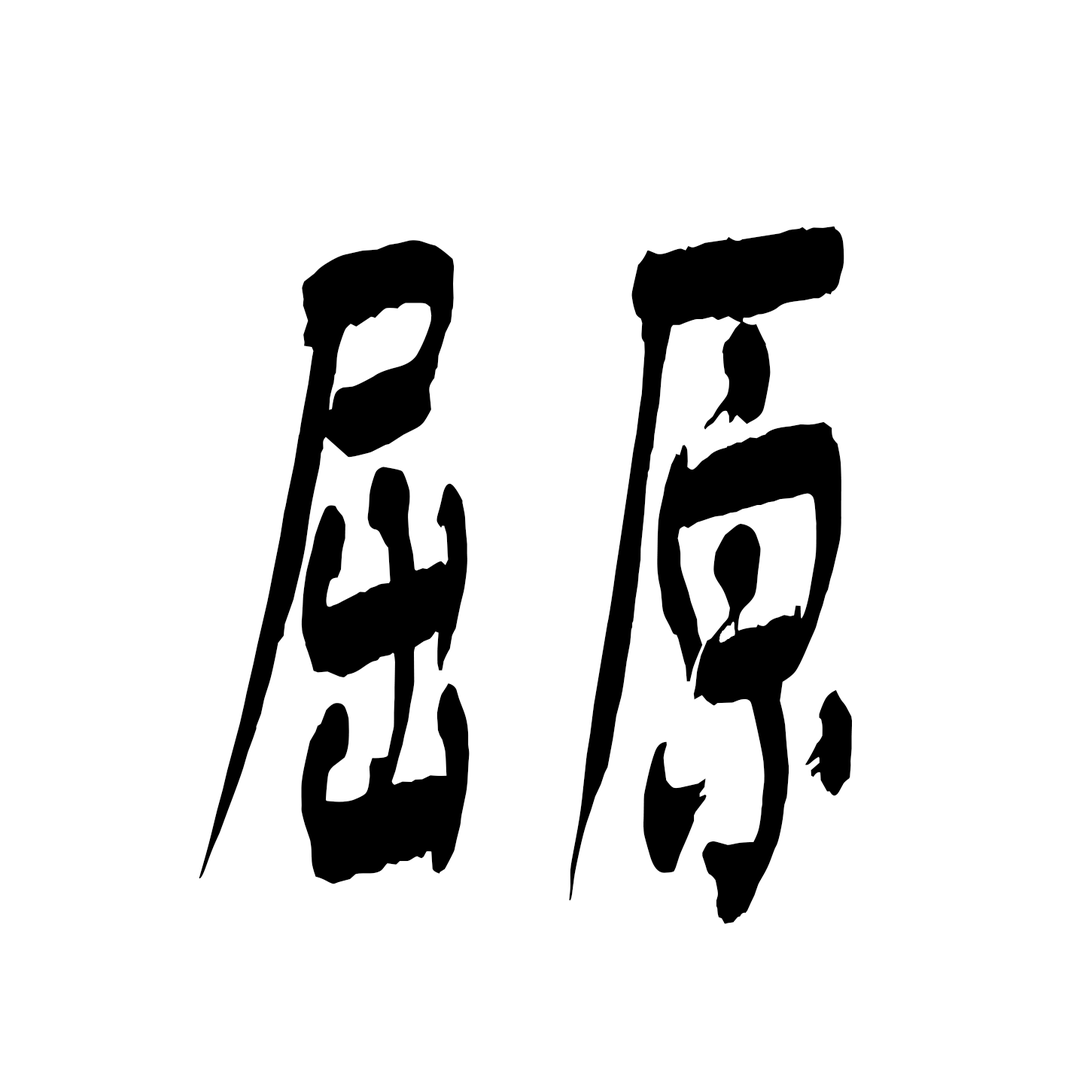
<style>
.page{position:relative;width:1092px;height:1092px;background:#ffffff}
.page>*{position:absolute;margin:0}
.t1{font:804.8px "HYn1gf";color:#000000;scale:0.45 1}
</style>
<div class="page">
<p class="t1" style="left:199px;top:226px;width:654px;height:698px">屈原</p>
</div>
